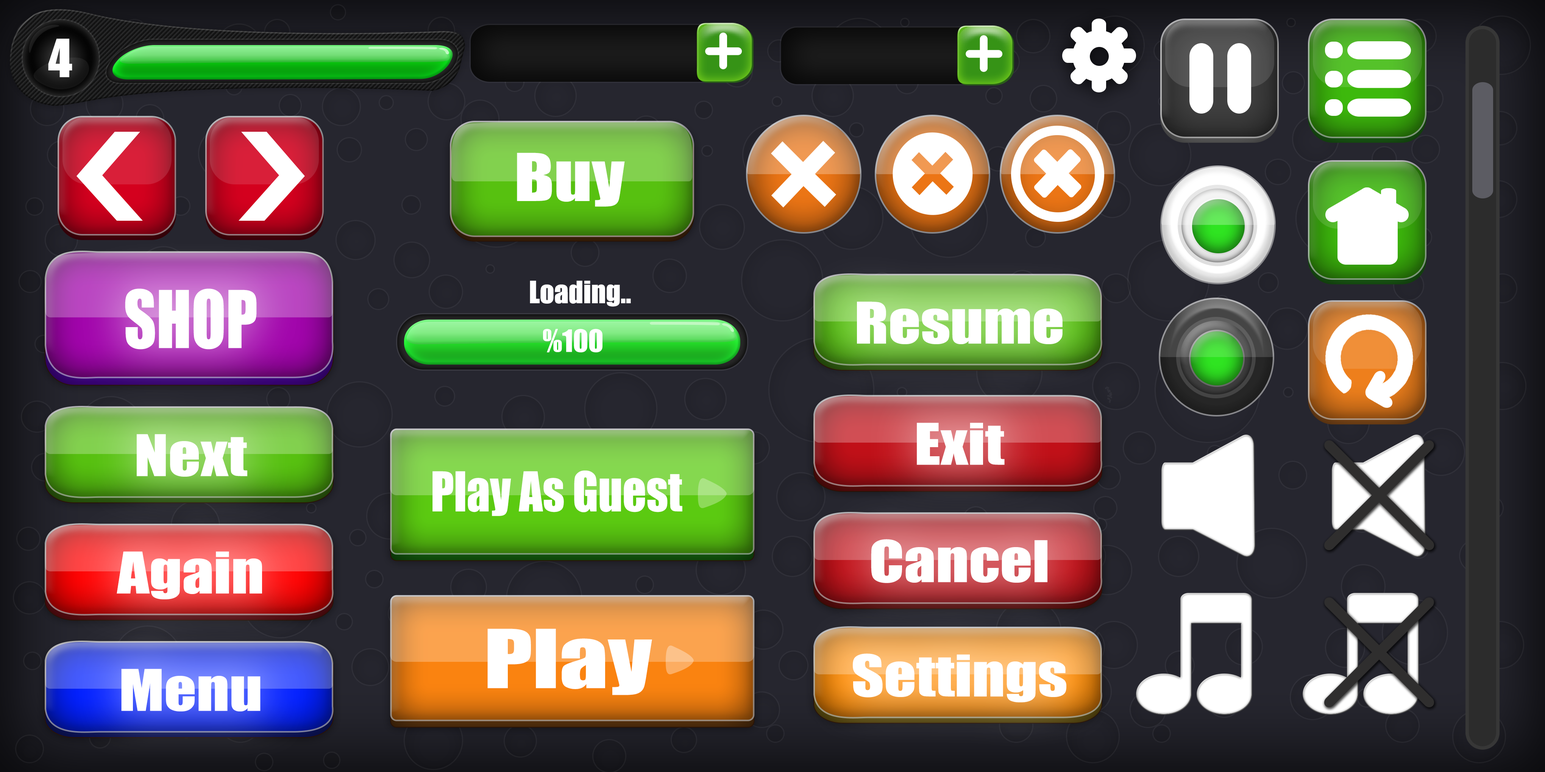
<style>
.page{position:relative;width:1545px;height:772px}
.page>*{position:absolute;margin:0}
.t1{font:48.5px "Impact";color:#ffffff}
.t2{font:60.8px "Impact";color:#ffffff;scale:1.19 1}
.t3{font:28.4px "Impact";color:#ffffff}
.t4{font:73.4px "Impact";color:#ffffff;scale:0.86 1}
.t5{font:52.9px "Impact";color:#ffffff;scale:1.19 1}
.t6{font:50.6px "Impact";color:#ffffff;scale:0.92 1}
.t7{font:75.1px "Impact";color:#ffffff;scale:1.3 1}
</style>
<div class="page">
<p class="t1" style="left:48px;top:39px;width:24px;height:38px">4</p>
<p class="t2" style="left:517px;top:153px;width:108px;height:54px">Buy</p>
<p class="t3" style="left:530px;top:281px;width:101px;height:26px">Loading..</p>
<p class="t4" style="left:125px;top:288px;width:132px;height:61px">SHOP</p>
<p class="t5" style="left:857px;top:301px;width:205px;height:43px">Resume</p>
<p class="t3" style="left:543px;top:329px;width:59px;height:23px">%100</p>
<p class="t5" style="left:917px;top:423px;width:87px;height:42px">Exit</p>
<p class="t5" style="left:137px;top:434px;width:110px;height:43px">Next</p>
<p class="t6" style="left:432px;top:470px;width:250px;height:46px">Play As Guest</p>
<p class="t5" style="left:871px;top:539px;width:176px;height:44px">Cancel</p>
<p class="t5" style="left:117px;top:551px;width:145px;height:48px">Again</p>
<p class="t7" style="left:487px;top:628px;width:165px;height:67px">Play</p>
<p class="t5" style="left:853px;top:653px;width:213px;height:49px">Settings</p>
<p class="t5" style="left:121px;top:669px;width:139px;height:42px">Menu</p>
</div>
